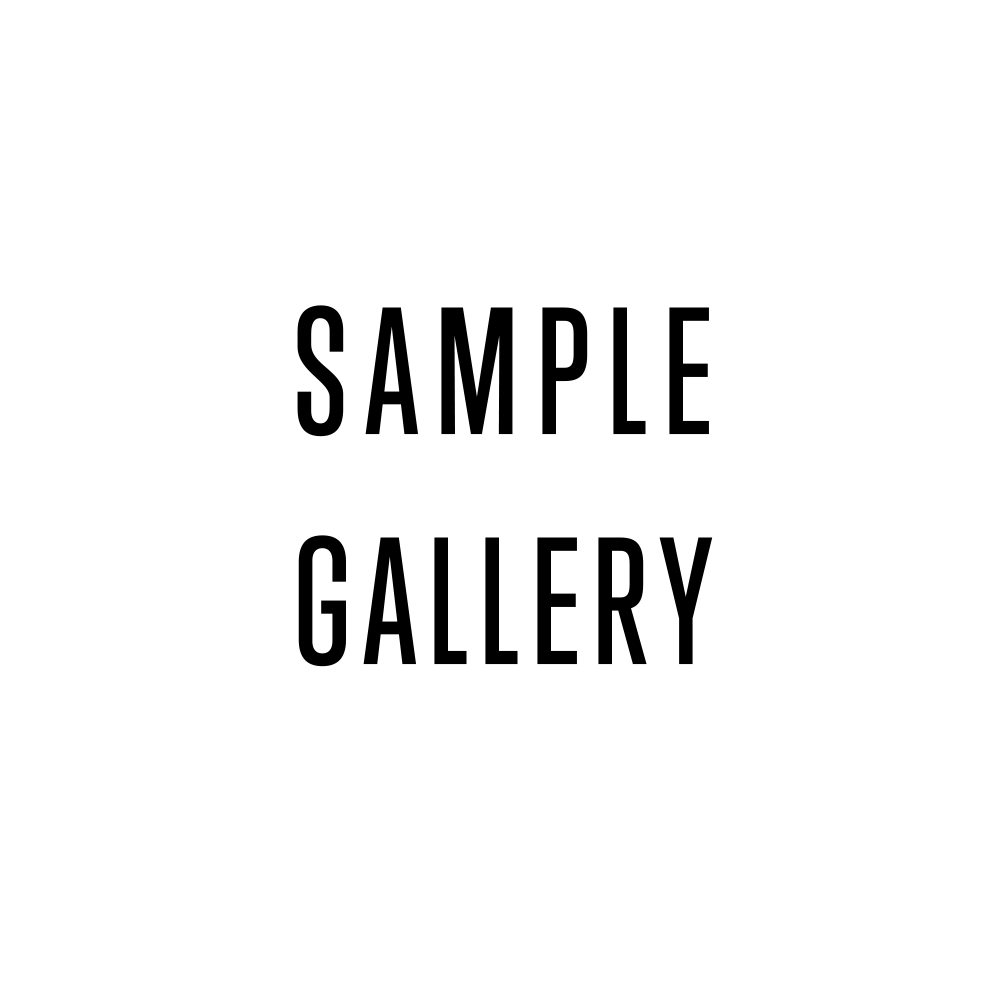
<style>
.page{position:relative;width:1000px;height:1000px;background:#ffffff}
.page>*{position:absolute;margin:0}
.t1{font:165.1px/229.3px "TrumpGothicPro-Medium";letter-spacing:0.07em;color:#000000}
.t2{font:165.1px/229.3px "TrumpGothicPro-Medium";letter-spacing:0.1em;color:#000000}
</style>
<div class="page">
<p class="t1" style="left:297px;top:305px;width:416px;height:362px;text-align:center"><span class="t2">SAMPLE<br></span>GALLERY</p>
</div>
